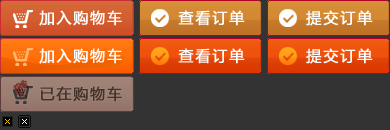
<style>
.page{position:relative;width:390px;height:130px;background:#333333}
.page>*{position:absolute;margin:0}
.t1{font:15px "MicrosoftYaHei";letter-spacing:0.1em;color:#ffffff;font-weight:bold}
.t2{font:15px "MicrosoftYaHei";letter-spacing:0.1em;color:#fefefe;font-weight:bold}
.t3{font:15px "MicrosoftYaHei";letter-spacing:0.1em;color:#41322b;font-weight:bold}
</style>
<div class="page">
<p class="t1" style="left:39px;top:10px;width:83px;height:16px">加入购物车</p>
<p class="t2" style="left:178px;top:10px;width:67px;height:16px">查看订单</p>
<p class="t2" style="left:306px;top:10px;width:67px;height:16px">提交订单</p>
<p class="t1" style="left:39px;top:48px;width:83px;height:16px">加入购物车</p>
<p class="t2" style="left:178px;top:48px;width:67px;height:16px">查看订单</p>
<p class="t2" style="left:306px;top:48px;width:67px;height:16px">提交订单</p>
<p class="t3" style="left:40px;top:86px;width:82px;height:16px">已在购物车</p>
</div>
